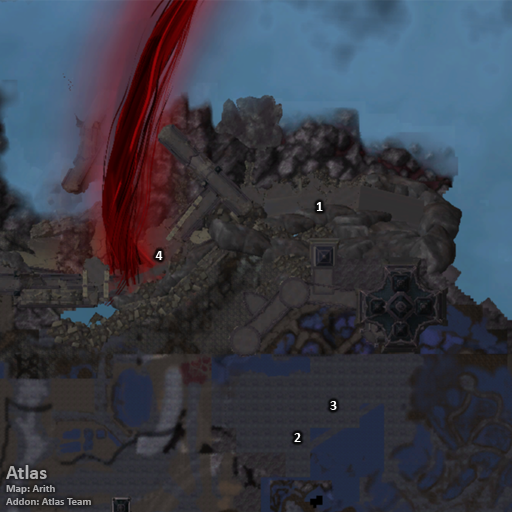
<style>
.page{position:relative;width:512px;height:512px}
.page>*{position:absolute;margin:0}
.t1{font:14px "Calibri-Bold";color:#ffffff}
.t2{font:11px "Calibri-Bold";color:#abaaab}
.t3{font:20px "Calibri-Bold";color:#abaaab}
</style>
<div class="page">
<p class="t1" style="left:316px;top:202px;width:7px;height:9px">1</p>
<p class="t1" style="left:155px;top:251px;width:8px;height:9px">4</p>
<p class="t1" style="left:330px;top:401px;width:7px;height:9px">3</p>
<p class="t1" style="left:294px;top:433px;width:7px;height:9px">2</p>
<p class="t2" style="left:6px;top:465px;width:85px;height:40px"><span class="t3">Atlas<br></span>Map: Arith<br>Addon: Atlas Team</p>
</div>
